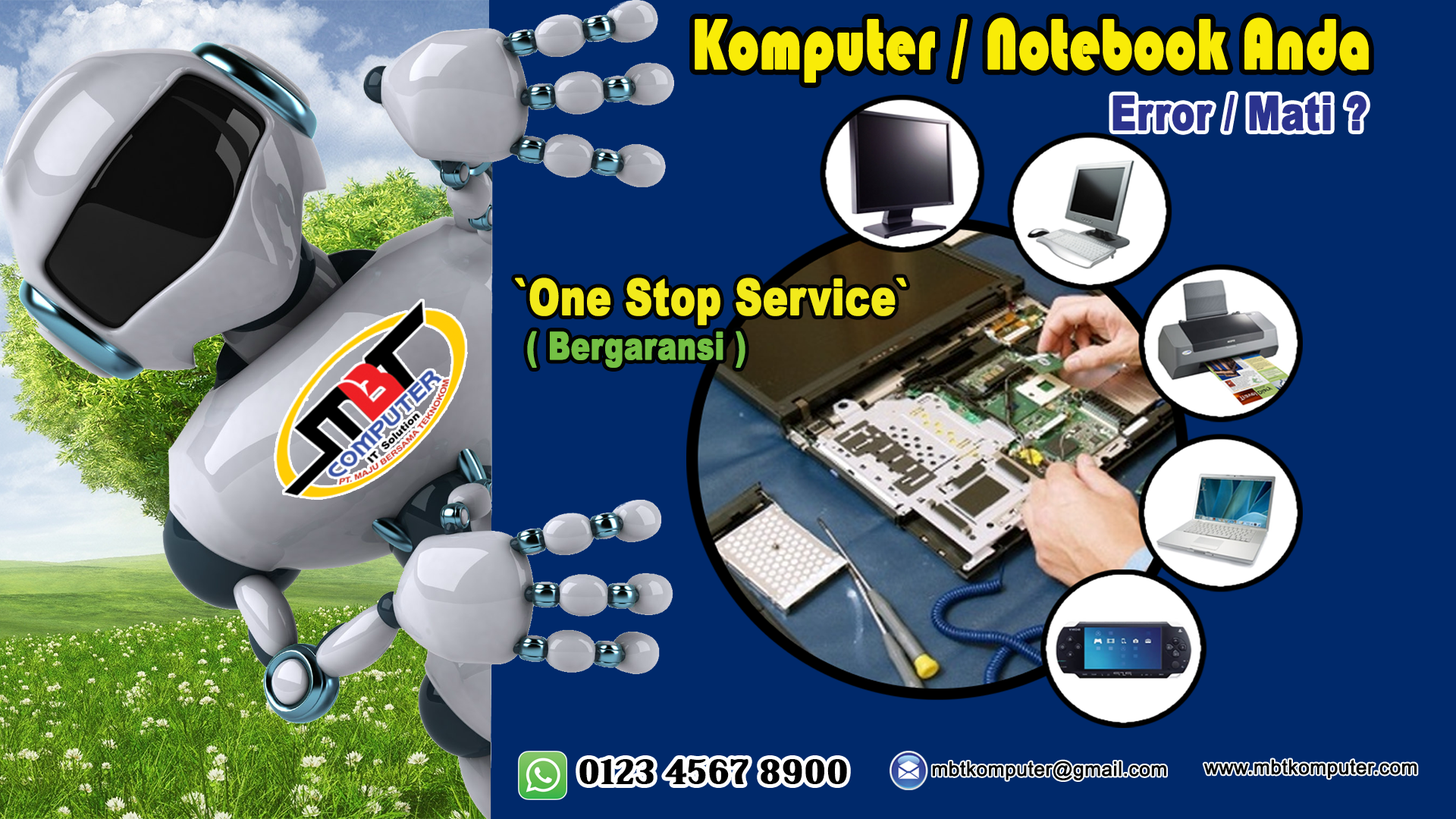
<style>
.page{position:relative;width:1456px;height:819px;background:#00296b}
.page>*{position:absolute;margin:0}
.t1{font:72.7px "Bauhaus93";color:#f9ec07;font-weight:bold;scale:0.74 1}
.t2{font:46.9px "Arial-Black";color:#2b338e;font-weight:bold;scale:0.74 1}
.t3{font:49.5px "Arial-Black";color:#f2ea1b;font-weight:bold;scale:0.75 1}
.t4{font:37.8px "Arial-Black";color:#74c044;font-weight:bold;scale:0.75 1}
.t5{font:32.1px "BirchStd";color:#000000;font-weight:bold;scale:2.1 1}
.t6{font:19.7px "ArialMT";color:#030405;font-weight:bold}
</style>
<div class="page">
<p class="t1" style="left:695px;top:17px;width:674px;height:66px">Komputer / Notebook Anda</p>
<p class="t2" style="left:1112px;top:95px;width:254px;height:36px">Error / Mati ?</p>
<p class="t3" style="left:515px;top:278px;width:392px;height:47px">`One Stop Service`</p>
<p class="t4" style="left:527px;top:331px;width:218px;height:37px">( Bergaransi )</p>
<p class="t5" style="left:579px;top:759px;width:268px;height:25px">0123 4567 8900</p>
<p class="t6" style="left:932px;top:761px;width:234px;height:19px">mbtkomputer@gmail.com</p>
<p class="t6" style="left:1203px;top:759px;width:214px;height:20px">www.mbtkomputer.com</p>
</div>
